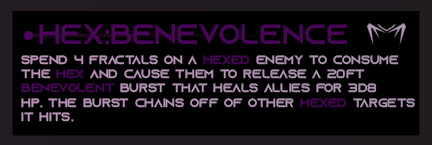
<style>
.page{position:relative;width:432px;height:145px;background:#000000}
.page>*{position:absolute;margin:0}
.t1{font:28px "AzonixRegular";color:#480557}
.t2{font:12px "AzonixRegular";color:#af92b1}
</style>
<div class="page">
<p class="t1" style="left:39px;top:24px;width:308px;height:21px">hex:benevolence</p>
<p class="t2" style="left:21px;top:55px;width:394px;height:67px">spend 4 fractals on a hexed enemy to consume<br>the hex and cause them to release a 20ft <br>benevolent burst that heals allies for 3d8 <br>hp. the burst chains off of other hexed targets <br>it hits.</p>
</div>
